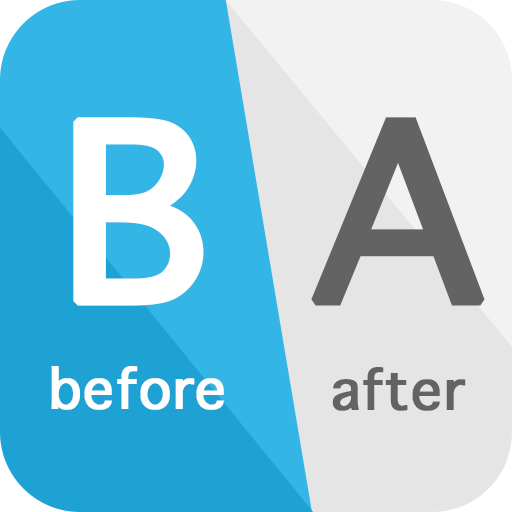
<style>
.page{position:relative;width:512px;height:512px;background:#e6e5e5}
.page>*{position:absolute;margin:0}
.t1{font:333px "AppleSymbols";color:#ffffff;font-weight:bold}
.t2{font:333px "AppleSymbols";color:#636363;font-weight:bold}
.t3{font:74.9px "AppleSymbols";color:#ffffff;font-weight:bold}
.t4{font:74.9px "AppleSymbols";color:#636363;font-weight:bold}
</style>
<div class="page">
<p class="t1" style="left:73px;top:117px;width:131px;height:189px">B</p>
<p class="t2" style="left:311px;top:117px;width:174px;height:189px">A</p>
<p class="t3" style="left:51px;top:366px;width:173px;height:44px">before</p>
<p class="t4" style="left:332px;top:367px;width:134px;height:44px">after</p>
</div>
